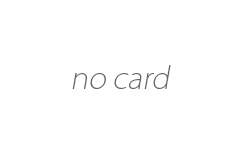
<style>
.page{position:relative;width:244px;height:154px;background:#ffffff}
.page>*{position:absolute;margin:0}
.t1{font:30px "KozGoPro-ExtraLight";color:#666666;font-style:italic}
</style>
<div class="page">
<p class="t1" style="left:72px;top:65px;width:99px;height:24px">no card</p>
</div>
